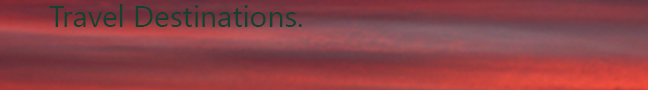
<style>
.page{position:relative;width:648px;height:90px}
.page>*{position:absolute;margin:0}
.t1{font:30px "Gadugi";color:#174031}
</style>
<div class="page">
<p class="t1" style="left:49px;top:4px;width:253px;height:23px">Travel Destinations.</p>
</div>
